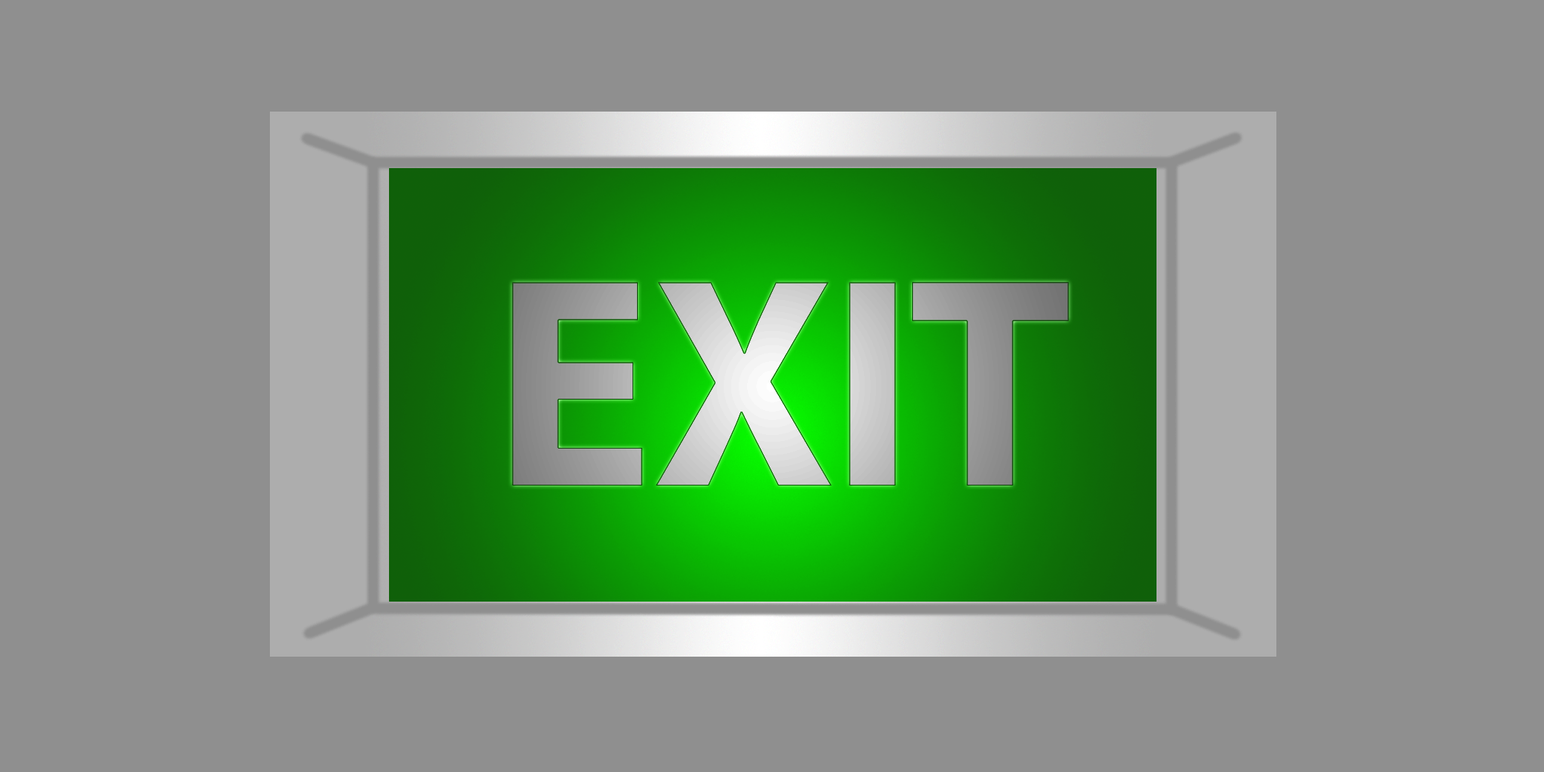
<style>
.page{position:relative;width:1544px;height:772px;background:#8f8f8f}
.page>*{position:absolute;margin:0}
.t1{font:301.6px "MyriadPro-Bold";text-transform:uppercase}
</style>
<div class="page">
<p class="t1" style="left:512px;top:282px;width:557px;height:204px">EXIT</p>
</div>
